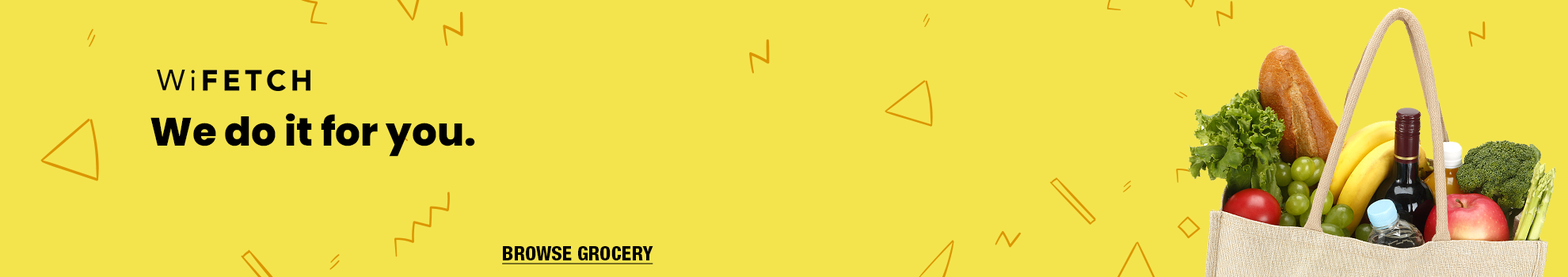
<style>
.page{position:relative;width:1568px;height:277px;background:#f3e44e}
.page>*{position:absolute;margin:0}
.t1{font:39.6px "Poppins-ExtraBold";color:#000000}
.t2{font:19.8px "HelveticaNeueLTStd-HvCn";color:#000000;text-decoration:underline}
</style>
<div class="page">
<p class="t1" style="left:150px;top:113px;width:325px;height:44px">We do it for you.</p>
<p class="t2" style="left:502px;top:246px;width:151px;height:19px">BROWSE GROCERY</p>
</div>
